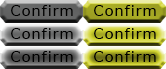
<style>
.page{position:relative;width:166px;height:69px}
.page>*{position:absolute;margin:0}
.t1{font:15px "BitstreamVeraSans-Roman";letter-spacing:0.05em;color:#000000}
</style>
<div class="page">
<p class="t1" style="left:11px;top:5px;width:62px;height:11px">Confirm</p>
<p class="t1" style="left:11px;top:28px;width:62px;height:11px">Confirm</p>
<p class="t1" style="left:11px;top:51px;width:62px;height:11px">Confirm</p>
</div>
